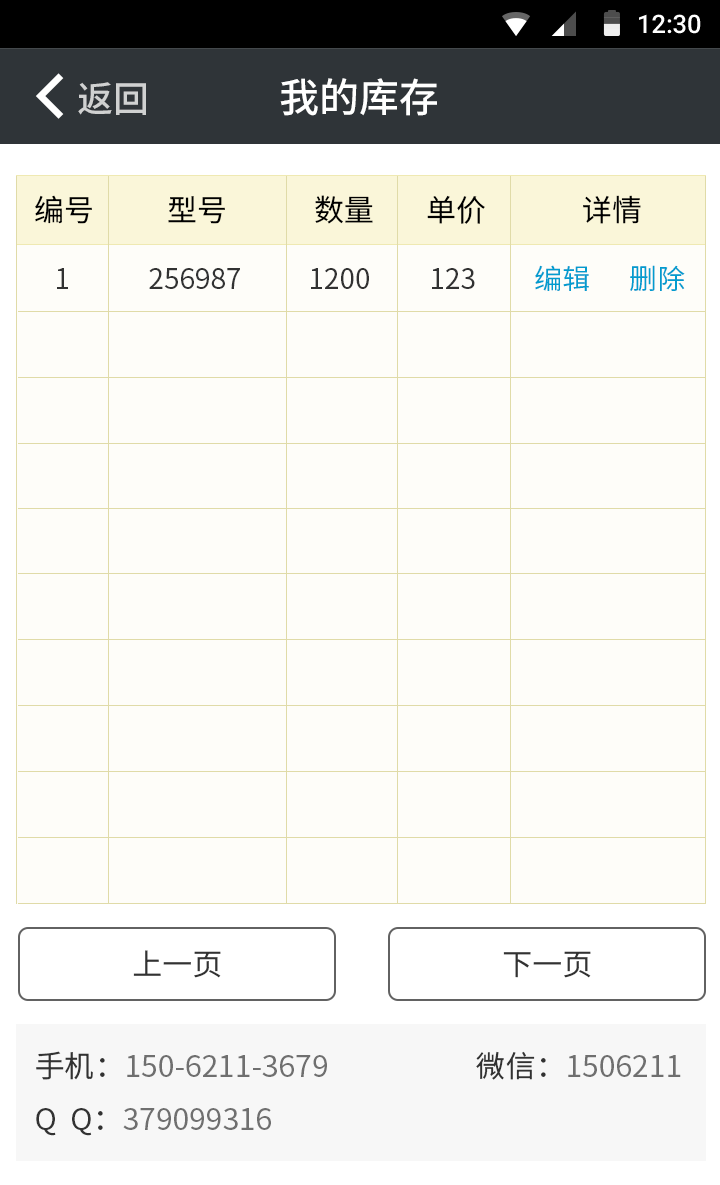
<style>
.page{position:relative;width:720px;height:1185px;background:#fefdf9}
.page>*{position:absolute;margin:0}
.t1{font:25.4px "Roboto-Medium";color:#ffffff}
.t2{font:40px "SourceHanSansCN-Medium";color:#ffffff}
.t3{font:36px "SourceHanSansCN-Medium";color:#d0d1d1}
.t4{font:30px "SourceHanSansCN-Regular";color:#000000}
.t5{font:28px "SourceHanSansCN-Regular";color:#323232}
.t6{font:28px "SourceHanSansCN-Regular";color:#029ccf}
.t7{font:30px "SourceHanSansCN-Regular";color:#323232}
.t8{font:30px "SourceHanSansCN-Regular";color:#6f6f6f}
</style>
<div class="page">
<p class="t1" style="left:639px;top:14px;width:62px;height:20px">12:30</p>
<p class="t1" style="left:639px;top:14px;width:62px;height:20px">12:30</p>
<p class="t2" style="left:280px;top:78px;width:157px;height:38px">我的库存</p>
<p class="t3" style="left:78px;top:82px;width:68px;height:33px">返回</p>
<p class="t4" style="left:35px;top:195px;width:57px;height:29px">编号</p>
<p class="t4" style="left:168px;top:196px;width:57px;height:28px">型号</p>
<p class="t4" style="left:315px;top:195px;width:58px;height:29px">数量</p>
<p class="t4" style="left:427px;top:195px;width:58px;height:29px">单价</p>
<p class="t4" style="left:583px;top:195px;width:58px;height:29px">详情</p>
<p class="t5" style="left:57px;top:268px;width:11px;height:21px">1</p>
<p class="t5" style="left:149px;top:268px;width:91px;height:21px">256987</p>
<p class="t5" style="left:311px;top:268px;width:58px;height:21px">1200</p>
<p class="t5" style="left:432px;top:268px;width:43px;height:21px">123</p>
<p class="t6" style="left:535px;top:265px;width:54px;height:26px">编辑</p>
<p class="t6" style="left:630px;top:265px;width:55px;height:26px">删除</p>
<p class="t7" style="left:133px;top:950px;width:88px;height:28px">上一页</p>
<p class="t7" style="left:503px;top:951px;width:88px;height:27px">下一页</p>
<p class="t8" style="left:36px;top:1051px;width:291px;height:29px"><span class="t7">手机：</span>150-6211-3679</p>
<p class="t8" style="left:476px;top:1051px;width:205px;height:29px"><span class="t7">微信：</span>1506211</p>
<p class="t8" style="left:36px;top:1108px;width:235px;height:28px"><span class="t7">Q  Q：</span>379099316</p>
</div>
